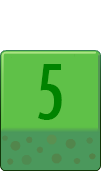
<style>
.page{position:relative;width:101px;height:171px;background:#5fc148}
.page>*{position:absolute;margin:0}
.t1{font:73.2px "Futura-CondensedMedium";color:#008300}
</style>
<div class="page">
<p class="t1" style="left:38px;top:64px;width:24px;height:56px">5</p>
</div>
